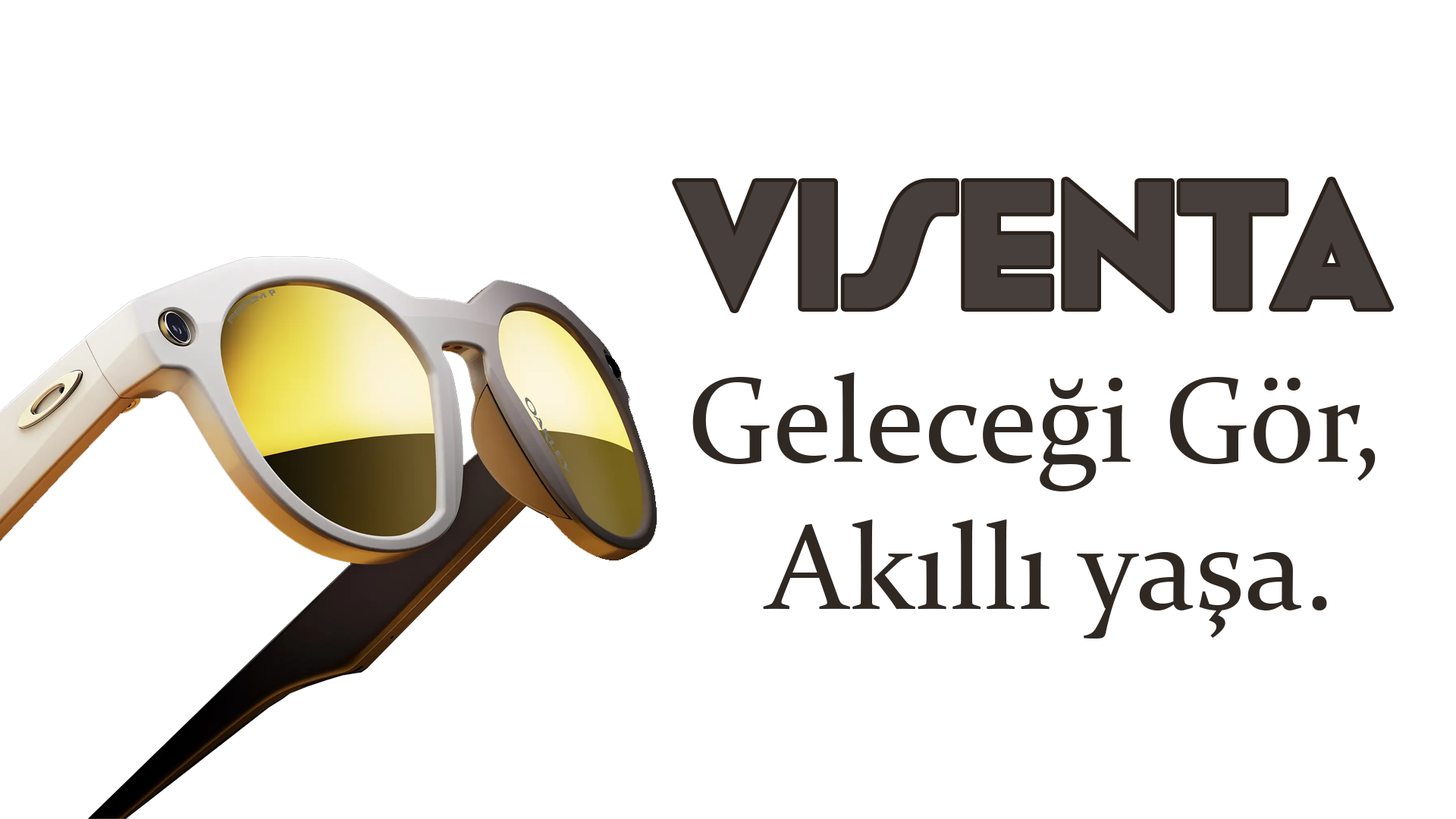
<style>
.page{position:relative;width:1456px;height:819px;background:#ffffff}
.page>*{position:absolute;margin:0}
.t1{font:179.9px "Gristela-Regular";color:#473f3c}
.t2{font:122.1px "Constantia";color:#302822}
</style>
<div class="page">
<p class="t1" style="left:676px;top:180px;width:715px;height:129px">VISENTA</p>
<p class="t2" style="left:692px;top:372px;width:684px;height:267px;text-align:center">Geleceği Gör, <br>Akıllı yaşa.</p>
</div>
